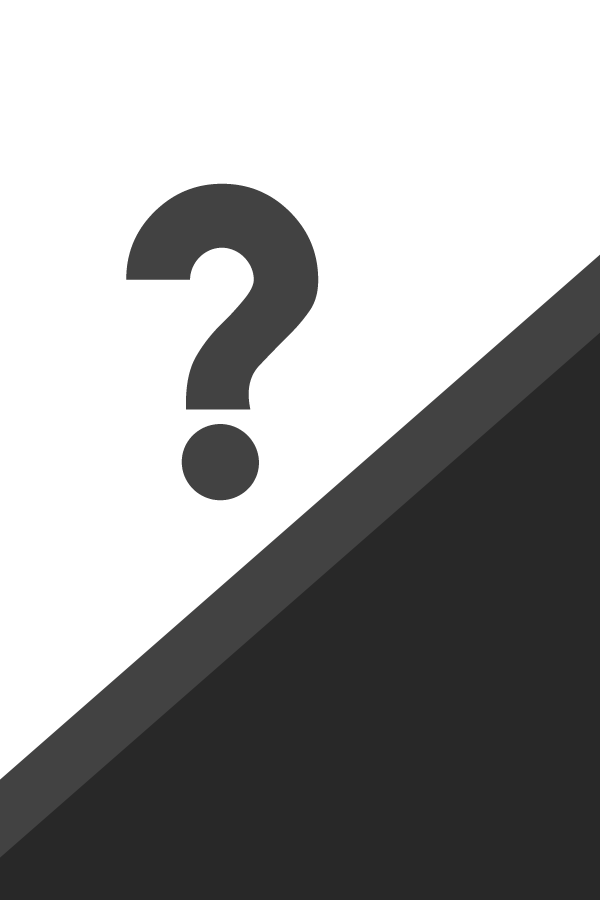
<style>
.page{position:relative;width:600px;height:900px;background:#ffffff}
.page>*{position:absolute;margin:0}
.t1{font:380.4px "LemonMilk";color:#424242}
</style>
<div class="page">
<p class="t1" style="left:126px;top:183px;width:193px;height:318px">?</p>
</div>
